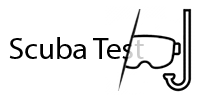
<style>
.page{position:relative;width:200px;height:100px;background:#ffffff}
.page>*{position:absolute;margin:0}
.t1{font:31.1px "MyriadPro-Regular";color:#000000}
</style>
<div class="page">
<p class="t1" style="left:9px;top:37px;width:135px;height:22px">Scuba Test</p>
</div>
